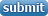
<style>
.page{position:relative;width:48px;height:16px}
.page>*{position:absolute;margin:0}
.t1{font:12px "Tahoma-Bold";color:#ffffff}
</style>
<div class="page">
<p class="t1" style="left:3px;top:2px;width:42px;height:10px">submit</p>
</div>
